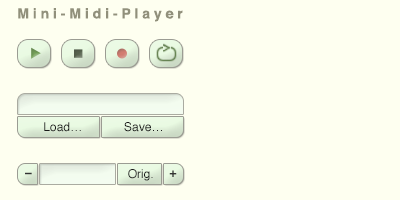
<style>
.page{position:relative;width:400px;height:200px;background:#fefff0}
.page>*{position:absolute;margin:0}
.t1{font:14px "Helvetica-Bold";color:#91907b}
.t2{font:12px "Helvetica";color:#191919}
.t3{font:12px "Helvetica-Bold";color:#333333}
</style>
<div class="page">
<p class="t1" style="left:18px;top:8px;width:165px;height:14px">M i n i - M i d i - P l a y e r</p>
<p class="t2" style="left:44px;top:122px;width:37px;height:10px">Load…</p>
<p class="t2" style="left:124px;top:122px;width:38px;height:10px">Save…</p>
<p class="t3" style="left:25px;top:172px;width:7px;height:3px">–</p>
<p class="t2" style="left:128px;top:169px;width:25px;height:12px">Orig.</p>
<p class="t3" style="left:169px;top:170px;width:8px;height:7px">+</p>
</div>
